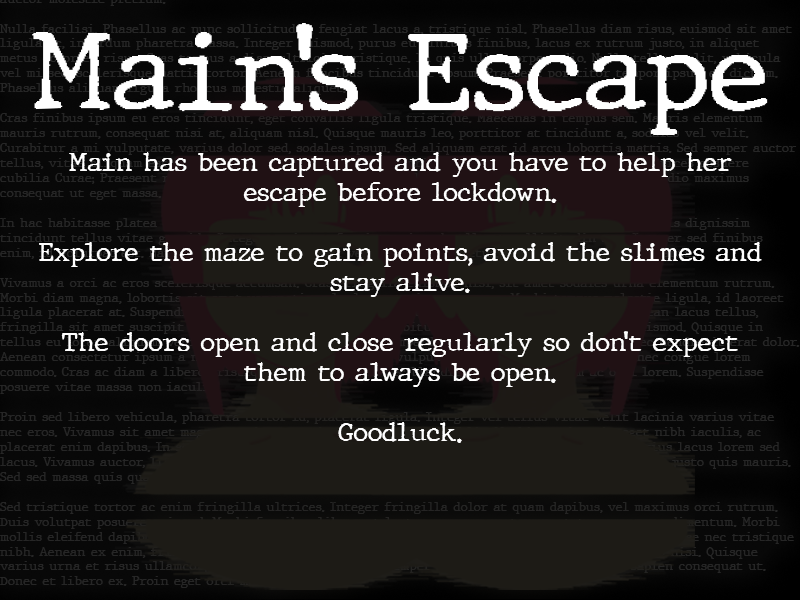
<style>
.page{position:relative;width:800px;height:600px;background:#1d1b16}
.page>*{position:absolute;margin:0}
.t1{font:108.3px "JMHTypewriter-Regular";color:#ffffff}
.t2{font:25px "JMHTypewriter-Regular";color:#ffffff}
</style>
<div class="page">
<p class="t1" style="left:32px;top:23px;width:736px;height:112px">Main’s Escape</p>
<p class="t2" style="left:39px;top:152px;width:723px;height:291px;text-align:center">Main has been captured and you have to help her escape before lockdown.<br><br>Explore the maze to gain points, avoid the slimes and stay alive.<br><br>The doors open and close regularly so don’t expect them to always be open.<br><br>Goodluck.</p>
</div>
